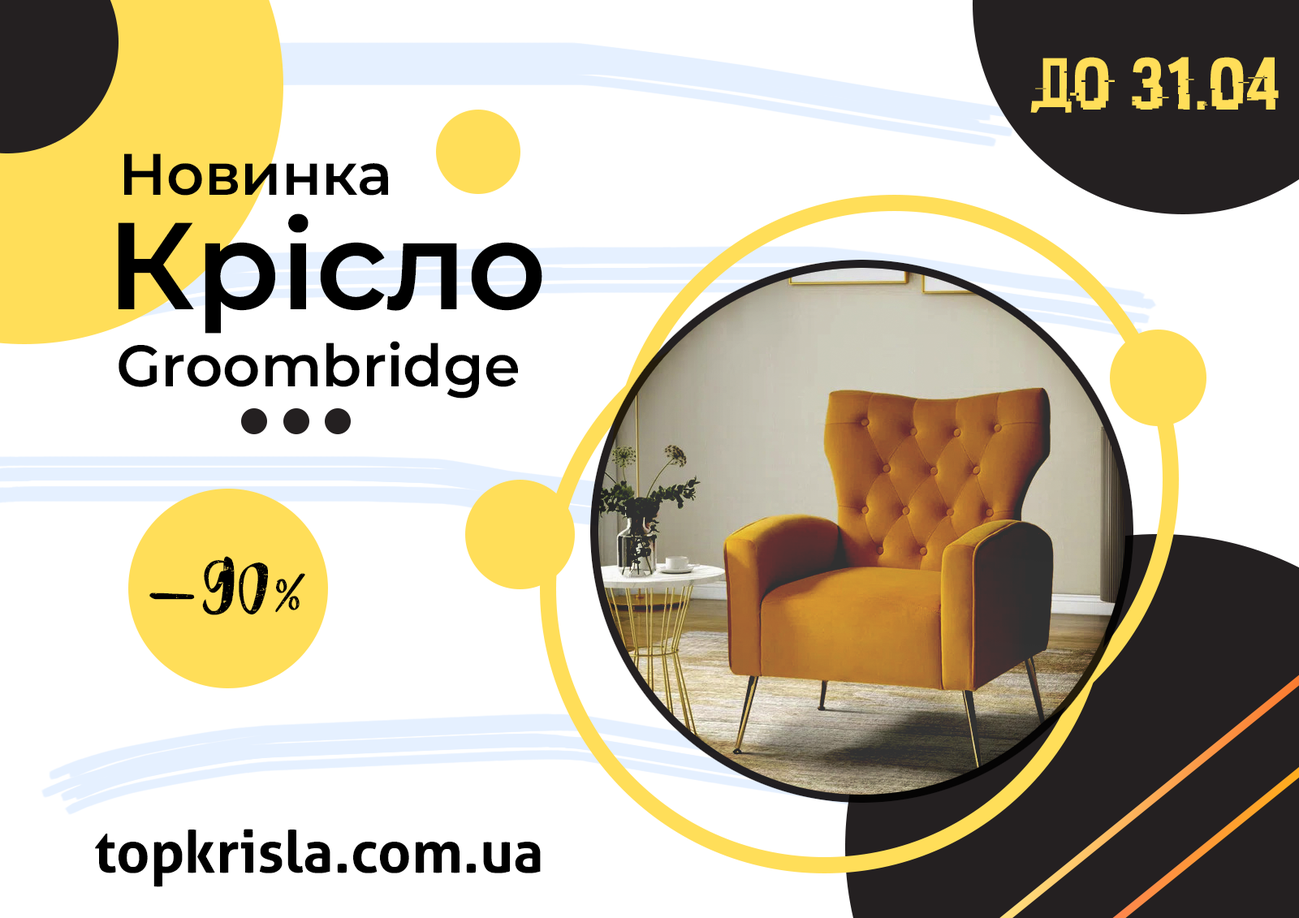
<style>
.page{position:relative;width:1299px;height:918px;background:#ffffff}
.page>*{position:absolute;margin:0}
.t1{font:74.7px "HACKED";color:#ffde59}
.t2{font:58.4px "Montserrat-SemiBold";color:#000000}
.t3{font:123.4px "Montserrat-SemiBold";color:#000000}
.t4{font:81.2px "HumblleRoughtAllCaps";color:#000000}
.t5{font:121.8px "HumblleRoughtAllCaps";color:#000000}
.t6{font:58.4px "Aller-Bold";color:#000000}
</style>
<div class="page">
<p class="t1" style="left:1030px;top:57px;width:249px;height:56px">до 31.04</p>
<p class="t2" style="left:124px;top:153px;width:264px;height:43px">Новинка</p>
<p class="t3" style="left:118px;top:213px;width:424px;height:121px">Крісло</p>
<p class="t2" style="left:119px;top:341px;width:399px;height:58px">Groombridge</p>
<p class="t4" style="left:149px;top:556px;width:156px;height:59px"><span class="t5">-</span>90%</p>
<p class="t6" style="left:95px;top:829px;width:446px;height:58px">topkrisla.com.ua</p>
</div>
